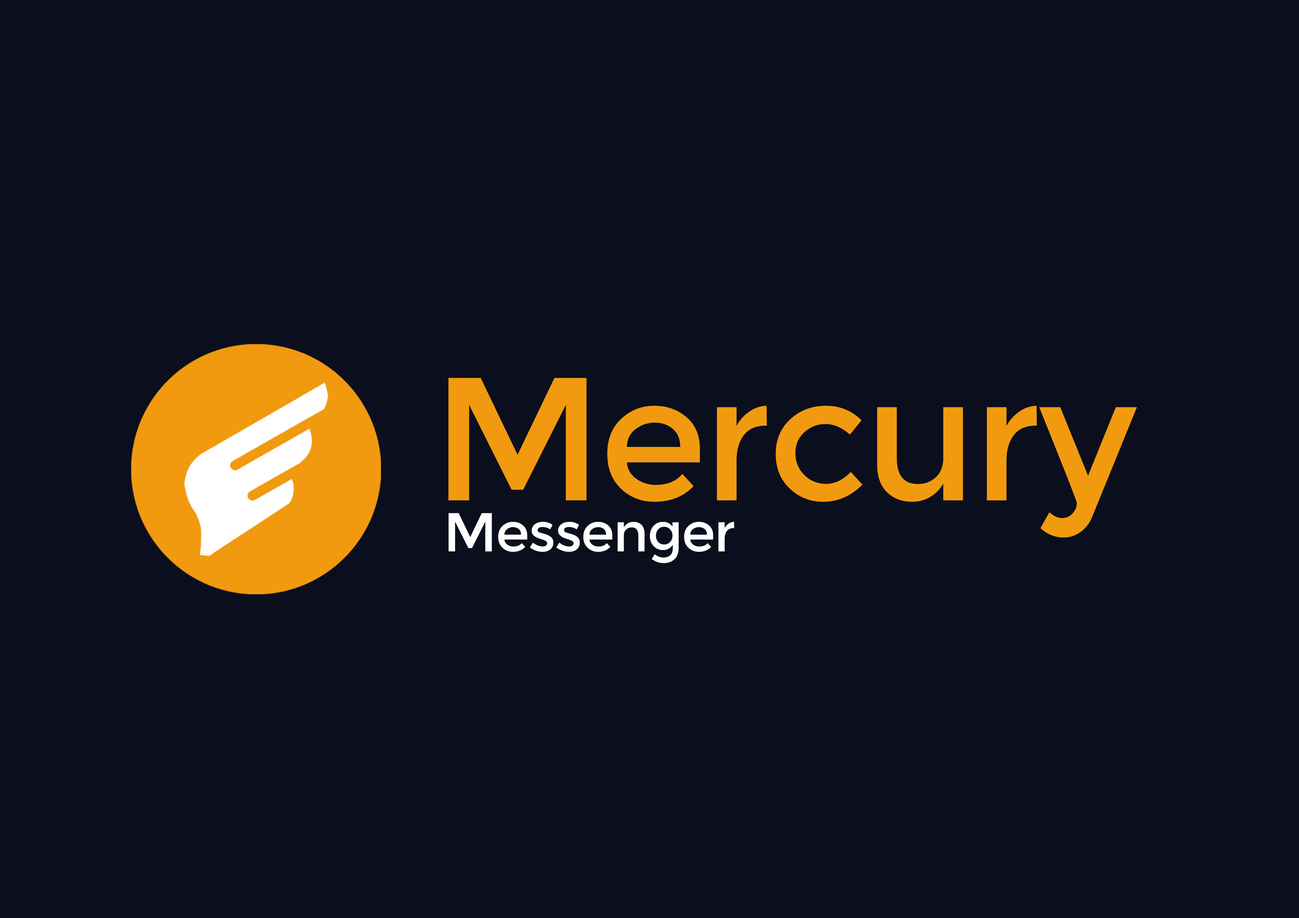
<style>
.page{position:relative;width:1299px;height:918px;background:#0b0f1d}
.page>*{position:absolute;margin:0}
.t1{font:175px "Montserrat-Regular";letter-spacing:-0.025em;color:#f19a0f}
.t2{font:54.8px "Montserrat-Regular";letter-spacing:-0.025em;color:#ffffff}
</style>
<div class="page">
<p class="t1" style="left:448px;top:378px;width:689px;height:160px">Mercury</p>
<p class="t2" style="left:448px;top:513px;width:286px;height:50px">Messenger</p>
</div>
